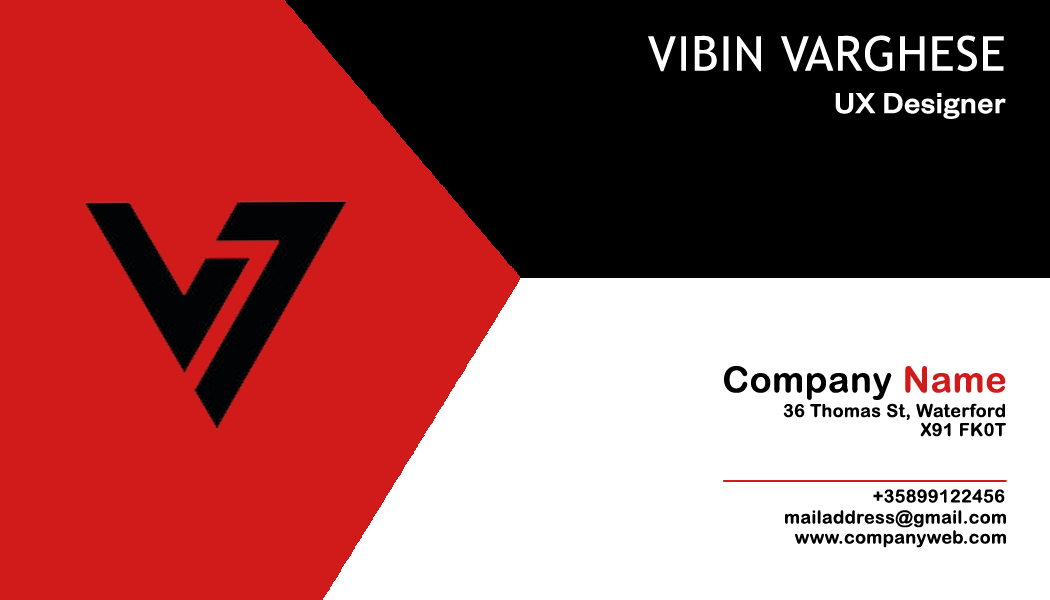
<style>
.page{position:relative;width:1050px;height:600px;background:#d11a1a}
.page>*{position:absolute;margin:0}
.t1{font:48px "TrebuchetMS";letter-spacing:0.02em;color:#ffffff}
.t2{font:32px "TestFoundersGrotesk-Medium";letter-spacing:0.02em;color:#ffffff}
.t3{font:36px "ArialRoundedMTBold";letter-spacing:0.02em;color:#000000}
.t4{font:36px "ArialRoundedMTBold";letter-spacing:0.02em;color:#d11a1a}
.t5{font:18px "ArialRoundedMTBold";letter-spacing:0.02em;color:#000000}
</style>
<div class="page">
<p class="t1" style="left:648px;top:35px;width:356px;height:37px">VIBIN VARGHESE</p>
<p class="t2" style="left:835px;top:93px;width:171px;height:26px">UX Designer</p>
<p class="t3" style="left:724px;top:366px;width:282px;height:34px">Company <span class="t4">Name</span></p>
<p class="t5" style="left:783px;top:403px;width:222px;height:17px">36 Thomas St, Waterford</p>
<p class="t5" style="left:920px;top:422px;width:86px;height:15px">X91 FK0T</p>
<p class="t5" style="left:873px;top:489px;width:132px;height:14px">+35899122456</p>
<p class="t5" style="left:785px;top:510px;width:221px;height:18px">mailaddress@gmail.com</p>
<p class="t5" style="left:795px;top:530px;width:211px;height:18px">www.companyweb.com</p>
</div>
